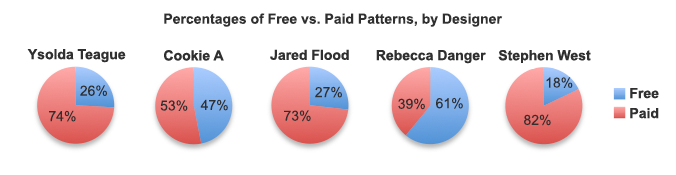
<style>
.page{position:relative;width:676px;height:175px;background:#ffffff}
.page>*{position:absolute;margin:0}
.t1{font:14px "Arial-BoldMT";color:#303030}
.t2{font:14px "ArialMT";color:#303030}
</style>
<div class="page">
<p class="t1" style="left:164px;top:13px;width:339px;height:14px">Percentages of Free vs. Paid Patterns, by Designer</p>
<p class="t2" style="left:546px;top:77px;width:27px;height:11px">18%</p>
<p class="t2" style="left:80px;top:85px;width:27px;height:11px">26%</p>
<p class="t2" style="left:315px;top:86px;width:27px;height:12px">27%</p>
<p class="t2" style="left:160px;top:100px;width:28px;height:11px">53%</p>
<p class="t2" style="left:200px;top:99px;width:28px;height:12px">47%</p>
<p class="t2" style="left:398px;top:98px;width:27px;height:12px">39%</p>
<p class="t2" style="left:436px;top:97px;width:27px;height:12px">61%</p>
<p class="t2" style="left:49px;top:110px;width:27px;height:12px">74%</p>
<p class="t2" style="left:284px;top:110px;width:27px;height:12px">73%</p>
<p class="t2" style="left:524px;top:114px;width:27px;height:12px">82%</p>
</div>
